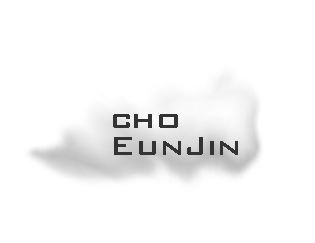
<style>
.page{position:relative;width:315px;height:243px;background:#ffffff}
.page>*{position:absolute;margin:0}
.t1{font:34.3px/27.5px "BankGothicBT-Medium";color:#333333}
</style>
<div class="page">
<p class="t1" style="left:113px;top:114px;width:125px;height:41px">cho<br>EunJin</p>
</div>
